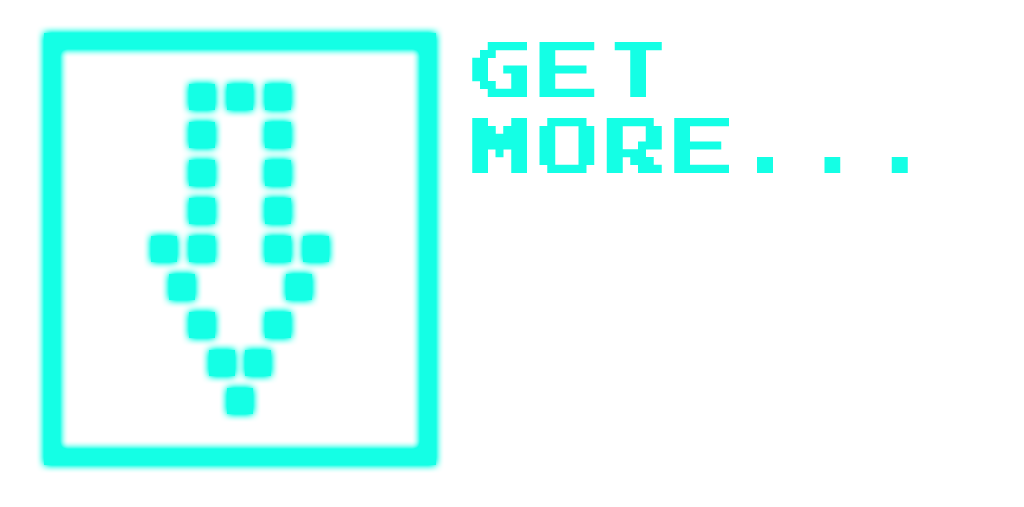
<style>
.page{position:relative;width:1024px;height:507px;background:#ffffff}
.page>*{position:absolute;margin:0}
.t1{font:62.4px/76px "PressStart2P";letter-spacing:0.08em;color:#14ffe5;text-transform:uppercase}
</style>
<div class="page">
<p class="t1" style="left:472px;top:42px;width:436px;height:131px">GET <br>MORE...</p>
</div>
